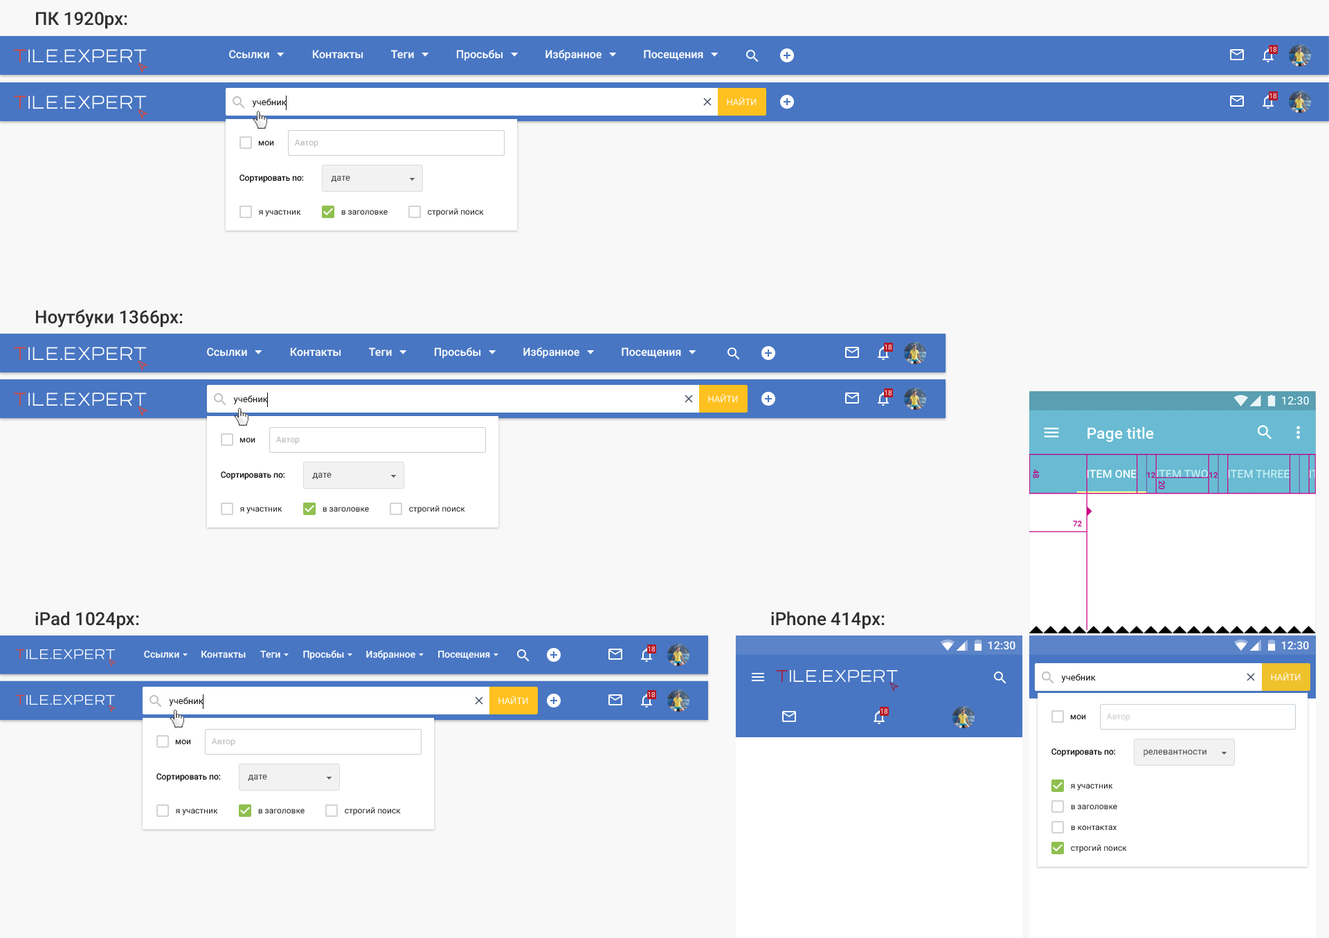
<style>
.page{position:relative;width:1329px;height:938px;background:#f8f8f8}
.page>*{position:absolute;margin:0}
.t1{font:18px "Roboto-Medium";color:#303030}
.t2{font:18px "EsqaderoFFCY4F";color:#ffffff;text-transform:uppercase}
.t3{font:18px "EsqaderoFFCY4F";color:#db4437;text-transform:uppercase}
.t4{font:11.1px "Roboto-Medium";color:#ffffff}
.t5{font:6.9px "Roboto-Regular";text-transform:uppercase}
.t6{font:9px "Roboto-Regular";color:#111111}
.t7{font:9px "Roboto-Regular";color:#ffffff}
.t8{font:8.3px "Roboto-Regular";color:#212121}
.t9{font:8.3px "Roboto-Regular";color:#c0c0c0}
.t10{font:8.3px "Roboto-Regular";color:#000000}
.t11{font:9px "Roboto-Regular";color:#444444}
.t12{font:13.5px "EsqaderoFFCY4F";color:#ffffff;text-transform:uppercase}
.t13{font:13.5px "EsqaderoFFCY4F";color:#db4437;text-transform:uppercase}
.t14{font:9.7px "Roboto-Medium";color:#ffffff}
.t15{font:16.5px "EsqaderoFFCY4F";color:#ffffff;text-transform:uppercase}
.t16{font:16.5px "EsqaderoFFCY4F";color:#a71c43;text-transform:uppercase}
.t17{font:8.3px "Roboto-Regular";color:#d1d1d1}
.t18{font:8.3px/20.8px "Roboto-Regular";color:#212121}
</style>
<div class="page">
<p class="t1" style="left:36px;top:12px;width:91px;height:17px">ПК 1920px:</p>
<p class="t2" style="left:14px;top:49px;width:133px;height:14px"><span class="t3">T</span>ile.Expert</p>
<p class="t4" style="left:229px;top:50px;width:40px;height:9px">Ссылки</p>
<p class="t4" style="left:312px;top:50px;width:51px;height:9px">Контакты</p>
<p class="t4" style="left:390px;top:50px;width:24px;height:9px">Теги</p>
<p class="t4" style="left:456px;top:49px;width:47px;height:12px">Просьбы</p>
<p class="t4" style="left:546px;top:49px;width:56px;height:12px">Избранное</p>
<p class="t4" style="left:644px;top:50px;width:59px;height:10px">Посещения</p>
<p class="t5" style="left:1270px;top:46px;width:7px;height:6px">18</p>
<p class="t2" style="left:14px;top:96px;width:133px;height:13px"><span class="t3">T</span>ile.Expert</p>
<p class="t6" style="left:252px;top:98px;width:35px;height:9px">учебник</p>
<p class="t7" style="left:727px;top:97px;width:30px;height:8px">НАЙТИ</p>
<p class="t5" style="left:1270px;top:93px;width:7px;height:5px">18</p>
<p class="t8" style="left:258px;top:141px;width:16px;height:5px">мои</p>
<p class="t9" style="left:294px;top:139px;width:24px;height:8px">Автор</p>
<p class="t10" style="left:240px;top:174px;width:64px;height:9px">Сортировать по:</p>
<p class="t11" style="left:331px;top:176px;width:19px;height:6px">дате</p>
<p class="t8" style="left:259px;top:210px;width:42px;height:7px">я участник</p>
<p class="t8" style="left:341px;top:210px;width:47px;height:5px">в заголовке</p>
<p class="t8" style="left:428px;top:208px;width:56px;height:9px">строгий поиск</p>
<p class="t1" style="left:36px;top:309px;width:147px;height:18px">Ноутбуки 1366px:</p>
<p class="t2" style="left:14px;top:347px;width:133px;height:14px"><span class="t3">T</span>ile.Expert</p>
<p class="t4" style="left:207px;top:348px;width:40px;height:9px">Ссылки</p>
<p class="t4" style="left:290px;top:348px;width:51px;height:9px">Контакты</p>
<p class="t4" style="left:368px;top:348px;width:24px;height:9px">Теги</p>
<p class="t4" style="left:434px;top:347px;width:47px;height:12px">Просьбы</p>
<p class="t4" style="left:523px;top:347px;width:56px;height:12px">Избранное</p>
<p class="t4" style="left:622px;top:348px;width:59px;height:10px">Посещения</p>
<p class="t5" style="left:885px;top:344px;width:7px;height:6px">18</p>
<p class="t5" style="left:885px;top:390px;width:7px;height:5px">18</p>
<p class="t2" style="left:14px;top:393px;width:133px;height:13px"><span class="t3">T</span>ile.Expert</p>
<p class="t6" style="left:233px;top:395px;width:35px;height:9px">учебник</p>
<p class="t7" style="left:708px;top:394px;width:30px;height:8px">НАЙТИ</p>
<p class="t8" style="left:240px;top:438px;width:15px;height:5px">мои</p>
<p class="t9" style="left:276px;top:436px;width:24px;height:8px">Автор</p>
<p class="t10" style="left:221px;top:471px;width:64px;height:9px">Сортировать по:</p>
<p class="t11" style="left:312px;top:473px;width:20px;height:6px">дате</p>
<p class="t8" style="left:240px;top:507px;width:42px;height:7px">я участник</p>
<p class="t8" style="left:323px;top:507px;width:46px;height:5px">в заголовке</p>
<p class="t8" style="left:409px;top:505px;width:56px;height:9px">строгий поиск</p>
<p class="t1" style="left:35px;top:611px;width:104px;height:18px">iPad 1024px:</p>
<p class="t1" style="left:771px;top:611px;width:114px;height:18px">iPhone 414px:</p>
<p class="t4" style="left:988px;top:641px;width:28px;height:9px">12:30</p>
<p class="t4" style="left:1281px;top:641px;width:28px;height:9px">12:30</p>
<p class="t12" style="left:15px;top:649px;width:100px;height:11px"><span class="t13">T</span>ile.Expert</p>
<p class="t14" style="left:144px;top:650px;width:35px;height:8px">Ссылки</p>
<p class="t14" style="left:201px;top:650px;width:45px;height:8px">Контакты</p>
<p class="t14" style="left:260px;top:650px;width:20px;height:8px">Теги</p>
<p class="t14" style="left:303px;top:650px;width:41px;height:10px">Просьбы</p>
<p class="t14" style="left:366px;top:650px;width:49px;height:10px">Избранное</p>
<p class="t14" style="left:438px;top:650px;width:52px;height:10px">Посещения</p>
<p class="t5" style="left:648px;top:646px;width:7px;height:5px">18</p>
<p class="t15" style="left:776px;top:669px;width:122px;height:14px"><span class="t16">T</span>ile.Expert</p>
<p class="t6" style="left:1061px;top:674px;width:35px;height:9px">учебник</p>
<p class="t7" style="left:1271px;top:672px;width:30px;height:9px">НАЙТИ</p>
<p class="t12" style="left:15px;top:694px;width:100px;height:11px"><span class="t13">T</span>ile.Expert</p>
<p class="t6" style="left:169px;top:697px;width:35px;height:9px">учебник</p>
<p class="t7" style="left:498px;top:696px;width:30px;height:8px">НАЙТИ</p>
<p class="t5" style="left:648px;top:692px;width:7px;height:5px">18</p>
<p class="t5" style="left:881px;top:708px;width:7px;height:6px">18</p>
<p class="t17" style="left:1106px;top:713px;width:25px;height:8px">Автор</p>
<p class="t8" style="left:1070px;top:714px;width:16px;height:6px">мои</p>
<p class="t8" style="left:175px;top:739px;width:16px;height:6px">мои</p>
<p class="t9" style="left:211px;top:738px;width:24px;height:8px">Автор</p>
<p class="t10" style="left:1052px;top:748px;width:64px;height:9px">Сортировать по:</p>
<p class="t11" style="left:1144px;top:750px;width:63px;height:7px">релевантности</p>
<p class="t10" style="left:156px;top:773px;width:65px;height:9px">Сортировать по:</p>
<p class="t11" style="left:248px;top:775px;width:19px;height:6px">дате</p>
<p class="t18" style="left:1071px;top:784px;width:56px;height:69px">я участник<br>в заголовке<br>в контактах<br>строгий поиск</p>
<p class="t8" style="left:176px;top:809px;width:42px;height:7px">я участник</p>
<p class="t8" style="left:258px;top:809px;width:47px;height:4px">в заголовке</p>
<p class="t8" style="left:345px;top:807px;width:56px;height:9px">строгий поиск</p>
</div>
